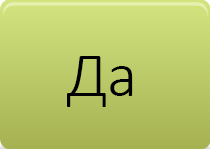
<style>
.page{position:relative;width:210px;height:149px}
.page>*{position:absolute;margin:0}
.t1{font:64px "Calibri-Light";color:#000000}
</style>
<div class="page">
<p class="t1" style="left:67px;top:56px;width:66px;height:51px">Да</p>
</div>
